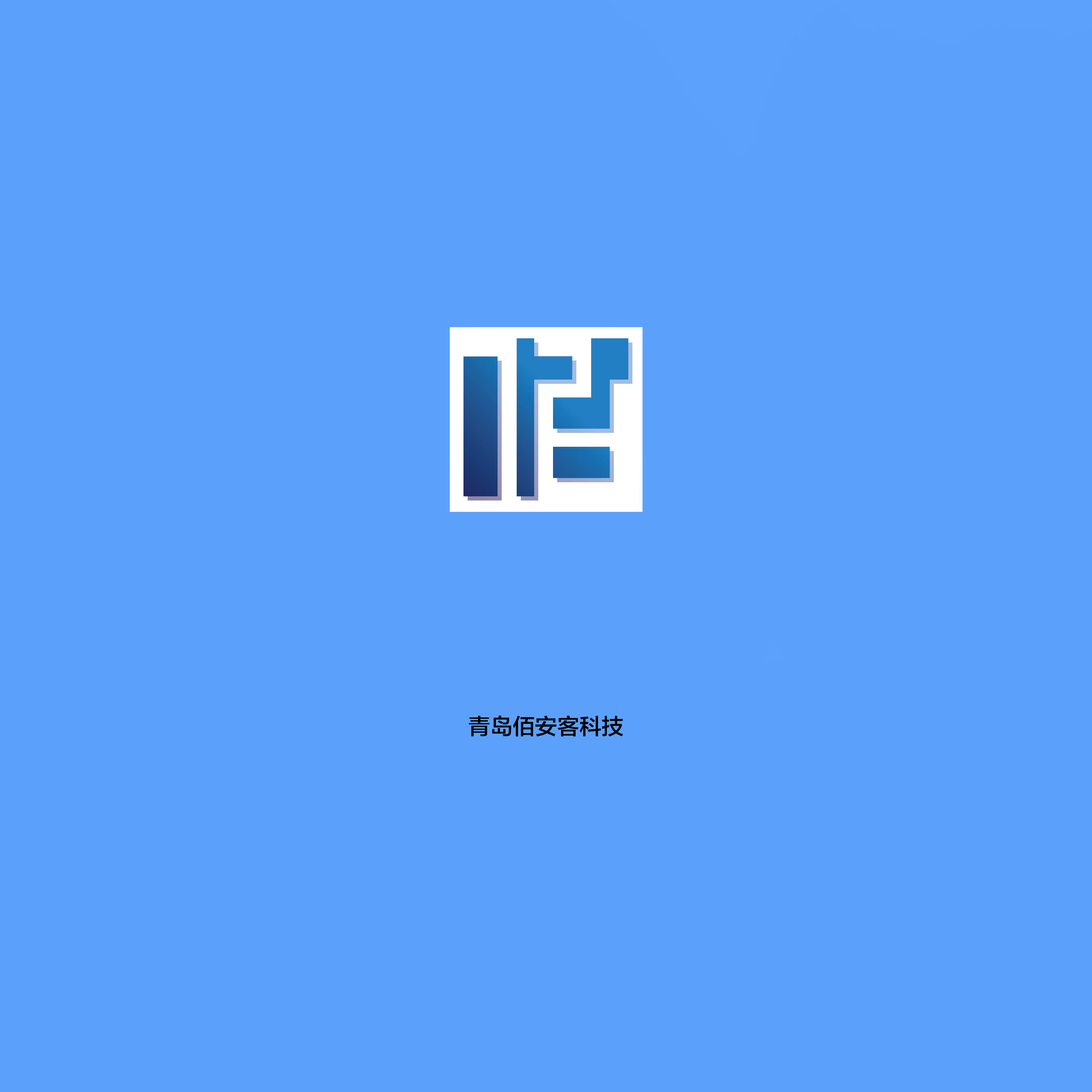
<style>
.page{position:relative;width:1092px;height:1092px;background:#5ba1fc}
.page>*{position:absolute;margin:0}
.t1{font:22.2px "FZLTZHK--GBK1-0";color:#000000}
</style>
<div class="page">
<p class="t1" style="left:469px;top:715px;width:154px;height:22px">青岛佰安客科技</p>
</div>
